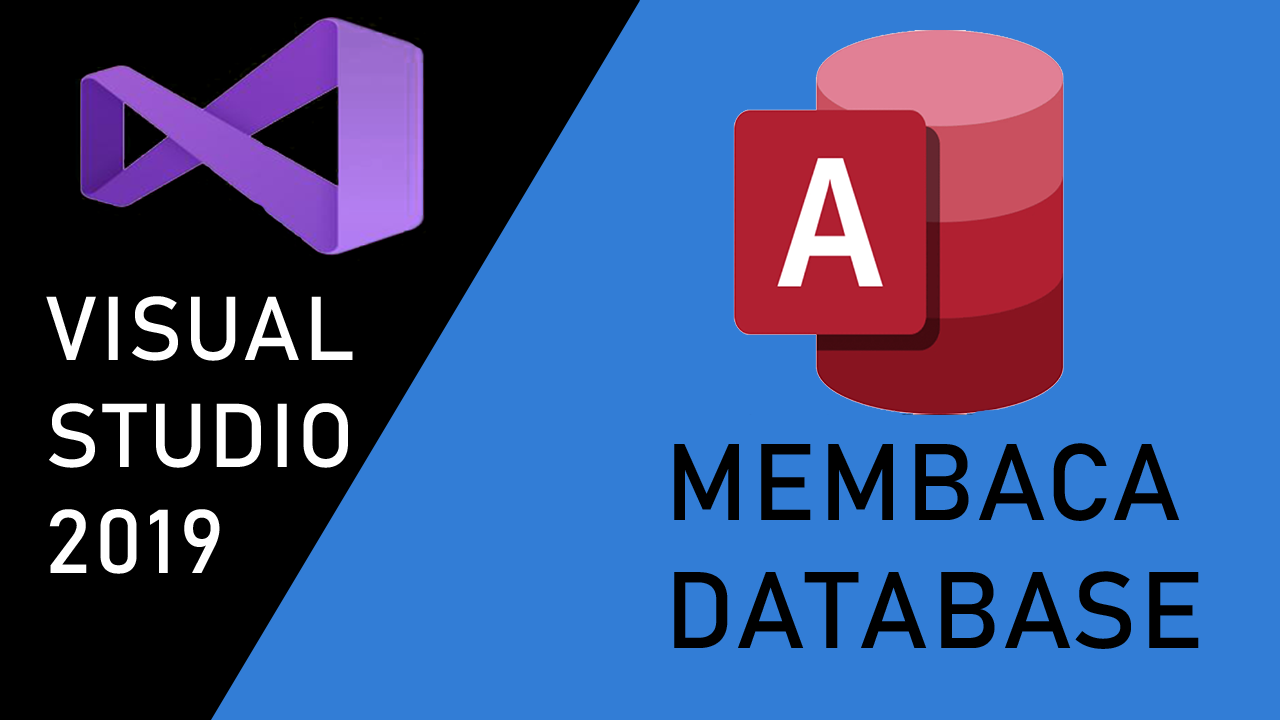
<style>
.page{position:relative;width:1280px;height:720px;background:#327dd6}
.page>*{position:absolute;margin:0}
.t1{font:88.9px "Bahnschrift";letter-spacing:0.035em;color:#ffffff}
.t2{font:106.7px "Bahnschrift";letter-spacing:0.035em;color:#000000}
</style>
<div class="page">
<p class="t1" style="left:46px;top:296px;width:307px;height:278px">VISUAL<br>STUDIO<br>2019</p>
<p class="t2" style="left:674px;top:443px;width:525px;height:206px">MEMBACA<br>DATABASE</p>
</div>
